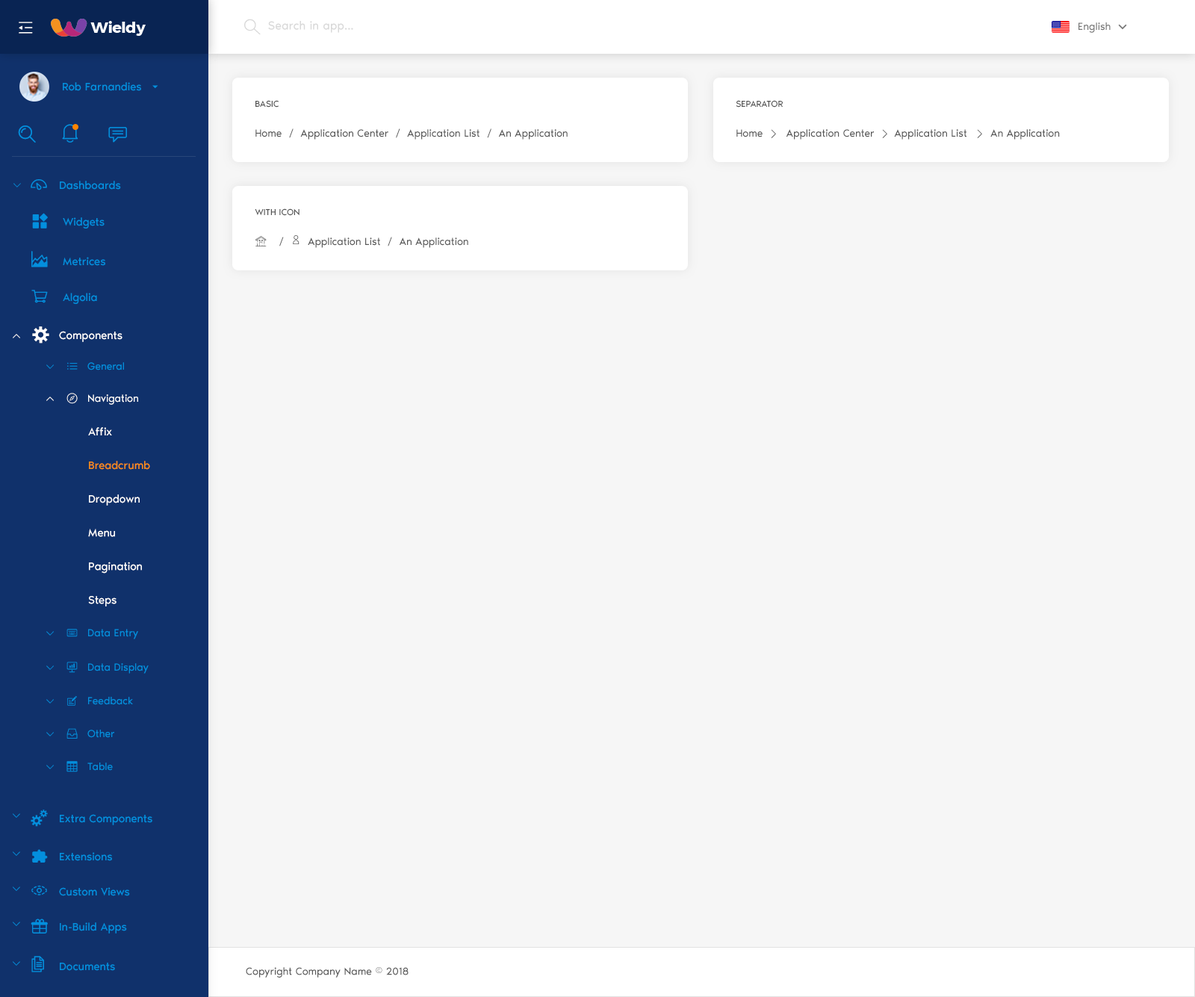
<style>
.page{position:relative;width:1195px;height:997px;background:#f6f6f6}
.page>*{position:absolute;margin:0}
.t1{font:12px "NoirPro-Regular";color:#d9d9d9}
.t2{font:10.5px "NoirPro-Regular";color:#757575}
.t3{font:11.2px "NoirPro-Regular";color:#038fde}
.t4{font:9px "NoirPro-Regular";color:#535353;text-transform:uppercase}
.t5{font:10.5px "NoirPro-Regular";color:#595959}
.t6{font:10.5px "gaxonant"}
.t7{font:9px "gaxonant"}
.t8{font:16.4px "gaxonant";color:#038fde}
.t9{font:16.4px "gaxonant";color:#ffffff}
.t10{font:11.2px "NoirPro-Regular";color:#ffffff}
.t11{font:9px "gaxonant";color:#038fde}
.t12{font:10.5px "gaxonant";color:#038fde}
.t13{font:10.5px "NoirPro-Regular";color:#038fde}
.t14{font:10.5px "NoirPro-Regular";color:#ffffff}
.t15{font:11.2px/29.9px "NoirPro-Regular";color:#ffffff}
.t16{font:11.2px/29.9px "NoirPro-Regular";color:#fa8c16}
.t17{font:8.7px "gaxonant";color:#038fde}
</style>
<div class="page">
<p class="t1" style="left:268px;top:21px;width:85px;height:12px">Search in app...</p>
<p class="t2" style="left:1079px;top:22px;width:32px;height:11px">English</p>
<p class="t3" style="left:63px;top:82px;width:78px;height:9px">Rob Farnandies</p>
<p class="t4" style="left:256px;top:100px;width:23px;height:8px">Basic</p>
<p class="t4" style="left:736px;top:100px;width:48px;height:8px">Separator</p>
<p class="t5" style="left:256px;top:129px;width:312px;height:11px">Home  /  Application Center  /  Application List  /  An Application</p>
<p class="t5" style="left:737px;top:129px;width:323px;height:11px">Home       Application Center      Application List       An Application</p>
<p class="t6" style="left:771px;top:129px;width:5px;height:9px">4</p>
<p class="t6" style="left:882px;top:129px;width:6px;height:9px">4</p>
<p class="t6" style="left:977px;top:129px;width:6px;height:9px">4</p>
<p class="t7" style="left:13px;top:183px;width:8px;height:5px">2</p>
<p class="t8" style="left:31px;top:179px;width:16px;height:12px">-</p>
<p class="t3" style="left:60px;top:181px;width:61px;height:9px">Dashboards</p>
<p class="t4" style="left:255px;top:208px;width:45px;height:8px">with icon</p>
<p class="t3" style="left:63px;top:217px;width:42px;height:12px">Widgets</p>
<p class="t8" style="left:31px;top:251px;width:17px;height:16px">m</p>
<p class="t3" style="left:63px;top:257px;width:42px;height:9px">Metrices</p>
<p class="t3" style="left:63px;top:293px;width:34px;height:11px">Algolia</p>
<p class="t9" style="left:32px;top:327px;width:17px;height:17px">%</p>
<p class="t7" style="left:13px;top:334px;width:7px;height:4px">5</p>
<p class="t10" style="left:59px;top:331px;width:64px;height:11px">Components</p>
<p class="t11" style="left:46px;top:365px;width:8px;height:4px">2</p>
<p class="t12" style="left:67px;top:362px;width:11px;height:8px">h</p>
<p class="t13" style="left:87px;top:362px;width:37px;height:9px">General</p>
<p class="t7" style="left:46px;top:397px;width:8px;height:4px">5</p>
<p class="t14" style="left:88px;top:395px;width:50px;height:10px">Navigation</p>
<p class="t15" style="left:88px;top:427px;width:62px;height:180px">Affix<br><span class="t16">Breadcrumb<br></span>Dropdown<br>Menu<br>Pagination<br>Steps</p>
<p class="t12" style="left:66px;top:629px;width:12px;height:8px">/</p>
<p class="t13" style="left:88px;top:629px;width:50px;height:11px">Data Entry</p>
<p class="t11" style="left:46px;top:631px;width:8px;height:5px">2</p>
<p class="t11" style="left:46px;top:666px;width:8px;height:4px">2</p>
<p class="t12" style="left:66px;top:662px;width:12px;height:11px">.</p>
<p class="t13" style="left:88px;top:663px;width:61px;height:11px">Data Display</p>
<p class="t11" style="left:46px;top:699px;width:8px;height:5px">2</p>
<p class="t13" style="left:88px;top:697px;width:45px;height:8px">Feedback</p>
<p class="t11" style="left:46px;top:732px;width:8px;height:5px">2</p>
<p class="t13" style="left:87px;top:730px;width:27px;height:8px">Other</p>
<p class="t11" style="left:46px;top:765px;width:8px;height:5px">2</p>
<p class="t13" style="left:87px;top:763px;width:26px;height:8px">Table</p>
<p class="t17" style="left:13px;top:814px;width:7px;height:4px">2</p>
<p class="t3" style="left:60px;top:814px;width:92px;height:12px">Extra Components</p>
<p class="t17" style="left:13px;top:852px;width:7px;height:4px">2</p>
<p class="t3" style="left:60px;top:853px;width:52px;height:8px">Extensions</p>
<p class="t17" style="left:13px;top:887px;width:7px;height:4px">2</p>
<p class="t8" style="left:31px;top:885px;width:16px;height:11px">,</p>
<p class="t3" style="left:59px;top:888px;width:71px;height:9px">Custom Views</p>
<p class="t17" style="left:13px;top:922px;width:7px;height:4px">2</p>
<p class="t3" style="left:60px;top:923px;width:67px;height:11px">In-Build Apps</p>
<p class="t17" style="left:13px;top:962px;width:7px;height:4px">2</p>
<p class="t8" style="left:31px;top:956px;width:13px;height:17px">)</p>
<p class="t3" style="left:60px;top:963px;width:55px;height:8px">Documents</p>
<p class="t5" style="left:246px;top:968px;width:163px;height:10px">Copyright Company Name © 2018</p>
</div>
